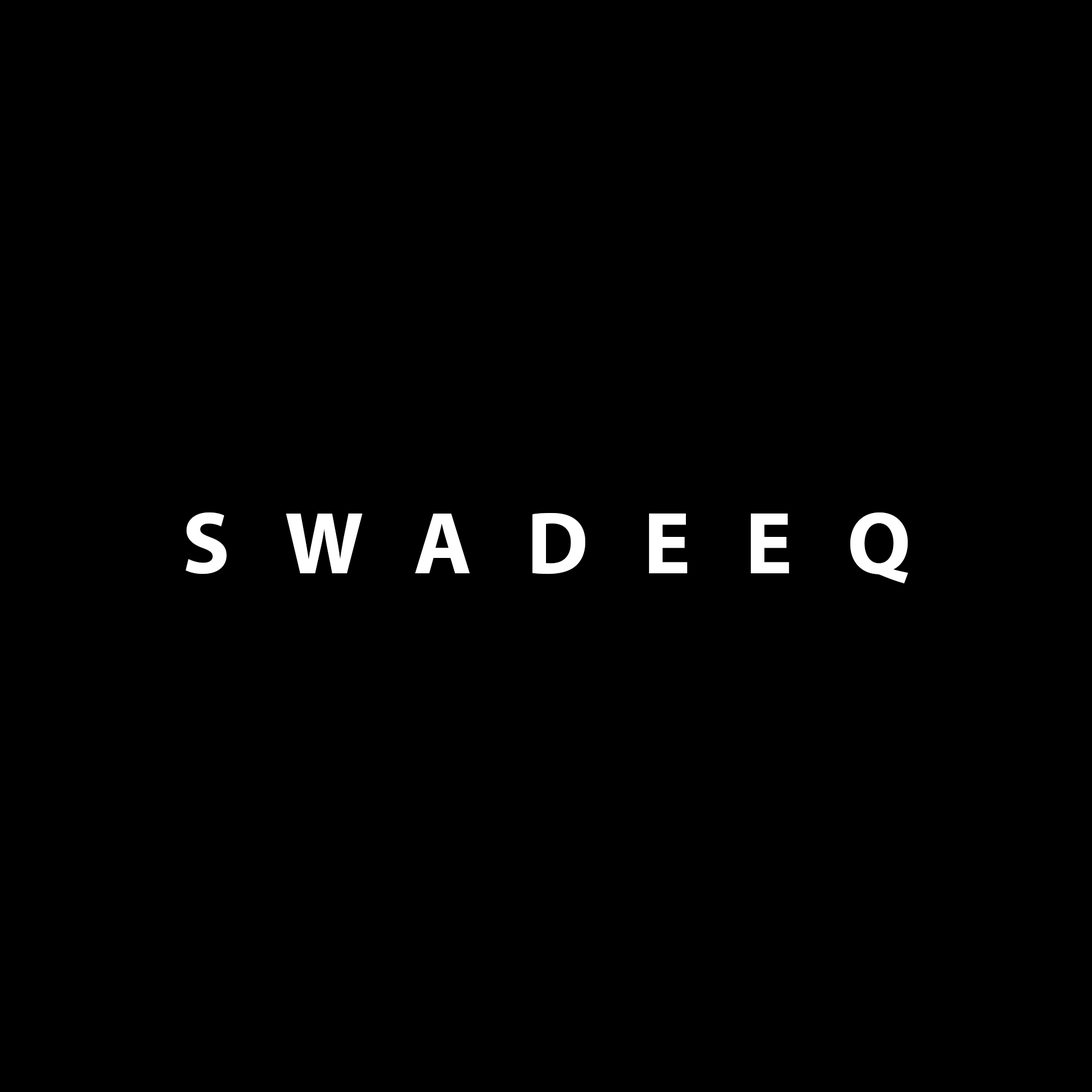
<style>
.page{position:relative;width:1092px;height:1092px;background:#000000}
.page>*{position:absolute;margin:0}
.t1{font:88.5px "MyriadPro-Bold";letter-spacing:0.62em;color:#ffffff}
</style>
<div class="page">
<p class="t1" style="left:185px;top:512px;width:723px;height:72px">SWADEEQ</p>
</div>
